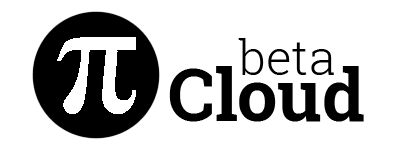
<style>
.page{position:relative;width:400px;height:150px;background:#ffffff}
.page>*{position:absolute;margin:0}
.t1{font:48px "RobotoSlab-Light";color:#000000}
.t2{font:72px "RobotoSlab-Bold";color:#000000}
</style>
<div class="page">
<p class="t1" style="left:238px;top:38px;width:96px;height:37px">beta</p>
<p class="t2" style="left:169px;top:66px;width:195px;height:56px">Cloud</p>
</div>
